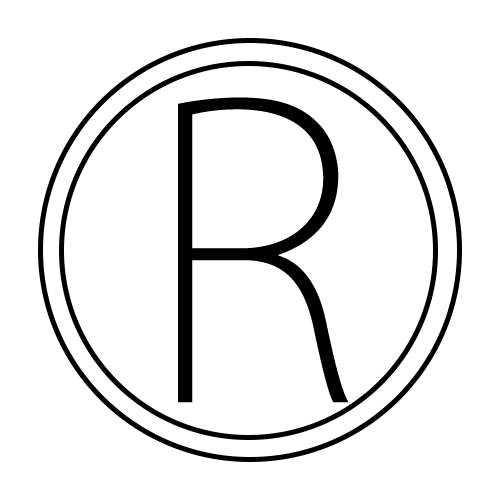
<style>
.page{position:relative;width:500px;height:500px;background:#ffffff}
.page>*{position:absolute;margin:0}
.t1{font:400px "KozGoPr6N-ExtraLight";color:#000000}
</style>
<div class="page">
<p class="t1" style="left:178px;top:97px;width:171px;height:306px">R</p>
</div>
